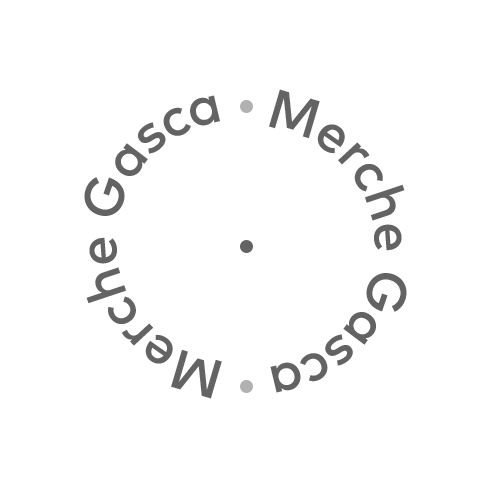
<style>
.page{position:relative;width:500px;height:500px;background:#ffffff}
.page>*{position:absolute;margin:0}
.t1{font:55px "MarkPro-Medium";letter-spacing:-0.04em;color:#636363}
</style>
<div class="page">
<p class="t1" style="left:269px;top:89px;width:138px;height:304px">Merche Gasca</p>
<p class="t1" style="left:84px;top:95px;width:138px;height:304px">Merche Gasca</p>
</div>
